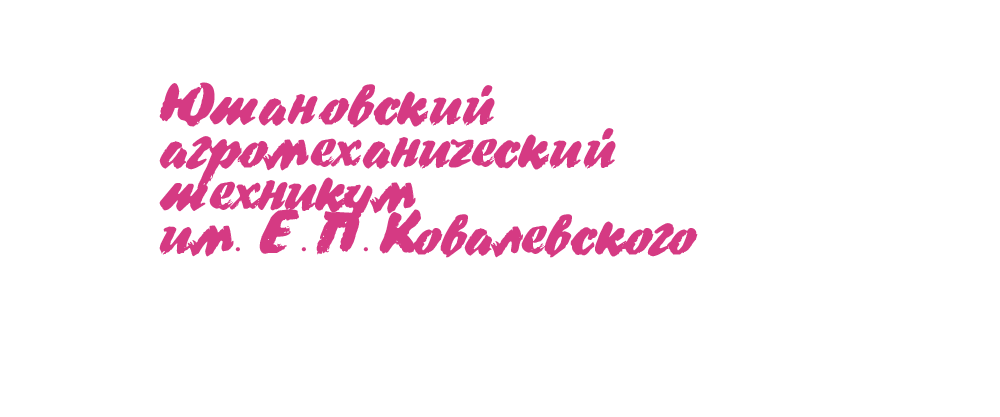
<style>
.page{position:relative;width:1000px;height:417px;background:#ffffff}
.page>*{position:absolute;margin:0}
.t1{font:36px "DSBroadBrush";color:#d53a83}
.t2{font:36px "DSBroadBrush";color:#343a40}
.t3{font:36px "KelsonSans-RegularRU";color:#d53a83}
</style>
<div class="page">
<p class="t1" style="left:159px;top:82px;width:539px;height:176px"><span class="t2">«</span>Ютановский<br>агромеханический <br>техникум<br>им<span class="t3">.  </span>Е<span class="t3">. </span>П.....<span class="t3">. </span>Ковалевского</p>
</div>
